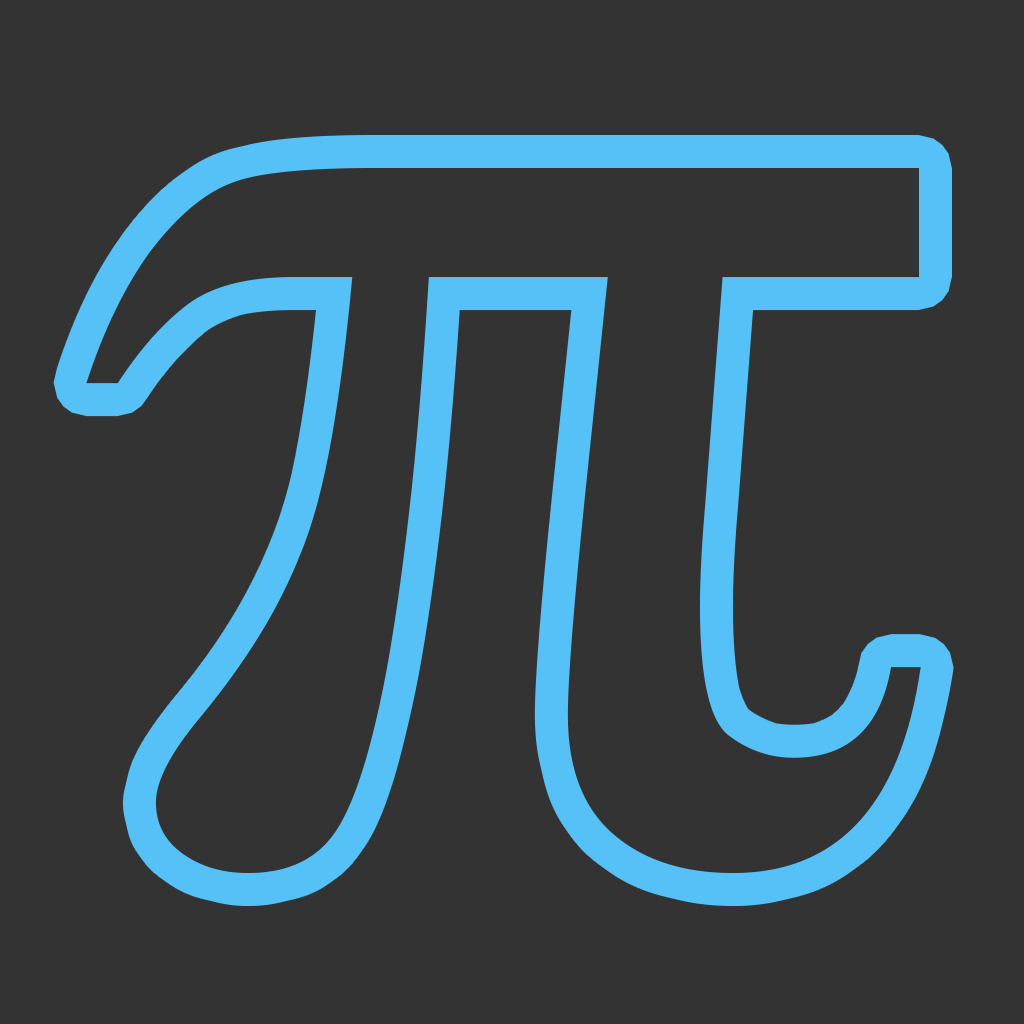
<style>
.page{position:relative;width:1024px;height:1024px;background:#333333}
.page>*{position:absolute;margin:0}
.t1{font:1537.9px "Herculanum";color:#333333;scale:1.13 1}
</style>
<div class="page">
<p class="t1" style="left:86px;top:168px;width:835px;height:705px">π</p>
</div>
